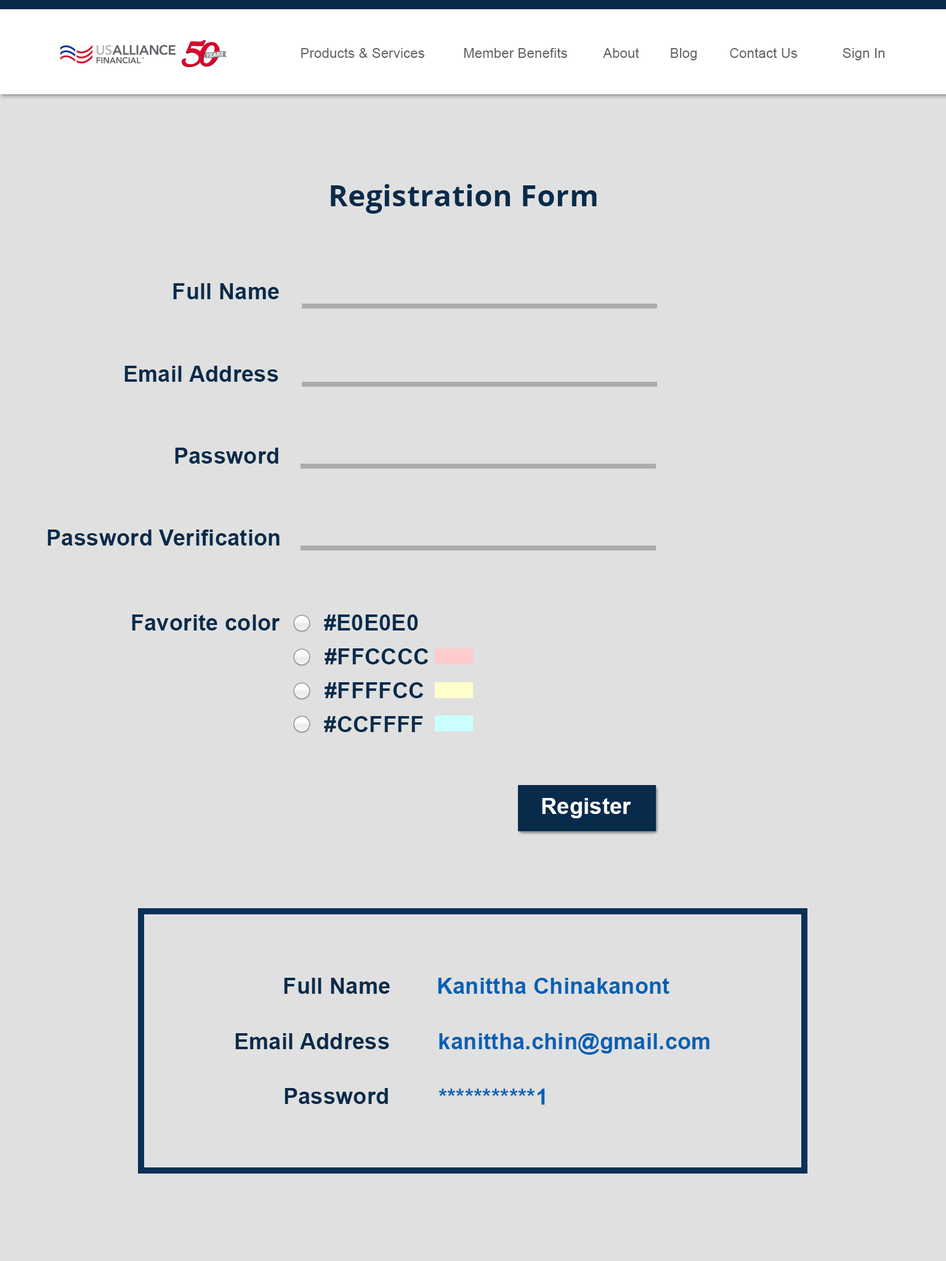
<style>
.page{position:relative;width:946px;height:1261px;background:#e0e0e0}
.page>*{position:absolute;margin:0}
.t1{font:13.5px "ArialMT";letter-spacing:0.01em;color:#63666a}
.t2{font:29.6px "OpenSans-Bold";letter-spacing:0.01em;color:#082b4b}
.t3{font:22.2px "Arial-BoldMT";letter-spacing:0.01em;color:#082b4b}
.t4{font:22.2px "Arial-BoldMT";letter-spacing:0.01em;color:#ffffff}
.t5{font:22.2px "Arial-BoldMT";letter-spacing:0.01em;color:#0160b6}
</style>
<div class="page">
<p class="t1" style="left:301px;top:48px;width:124px;height:10px">Products &amp; Services</p>
<p class="t1" style="left:464px;top:48px;width:103px;height:10px">Member Benefits</p>
<p class="t1" style="left:603px;top:48px;width:36px;height:10px">About</p>
<p class="t1" style="left:670px;top:48px;width:27px;height:12px">Blog</p>
<p class="t1" style="left:730px;top:48px;width:67px;height:10px">Contact Us</p>
<p class="t1" style="left:842px;top:48px;width:43px;height:12px">Sign In</p>
<p class="t2" style="left:331px;top:184px;width:266px;height:30px">Registration Form</p>
<p class="t3" style="left:173px;top:283px;width:106px;height:16px">Full Name</p>
<p class="t3" style="left:124px;top:366px;width:154px;height:16px">Email Address</p>
<p class="t3" style="left:175px;top:448px;width:103px;height:16px">Password</p>
<p class="t3" style="left:47px;top:529px;width:233px;height:16px">Password Verification</p>
<p class="t3" style="left:132px;top:614px;width:148px;height:16px">Favorite color</p>
<p class="t3" style="left:324px;top:614px;width:94px;height:16px">#E0E0E0</p>
<p class="t3" style="left:324px;top:648px;width:105px;height:16px">#FFCCCC</p>
<p class="t3" style="left:324px;top:682px;width:100px;height:16px">#FFFFCC</p>
<p class="t3" style="left:324px;top:716px;width:99px;height:16px">#CCFFFF</p>
<p class="t4" style="left:542px;top:798px;width:89px;height:20px">Register</p>
<p class="t3" style="left:284px;top:978px;width:106px;height:16px">Full Name</p>
<p class="t5" style="left:438px;top:978px;width:231px;height:16px">Kanittha Chinakanont</p>
<p class="t3" style="left:235px;top:1033px;width:154px;height:16px">Email Address</p>
<p class="t5" style="left:439px;top:1033px;width:270px;height:22px">kanittha.chin@gmail.com</p>
<p class="t3" style="left:284px;top:1088px;width:104px;height:16px">Password</p>
<p class="t5" style="left:438px;top:1089px;width:107px;height:16px">***********1</p>
</div>
